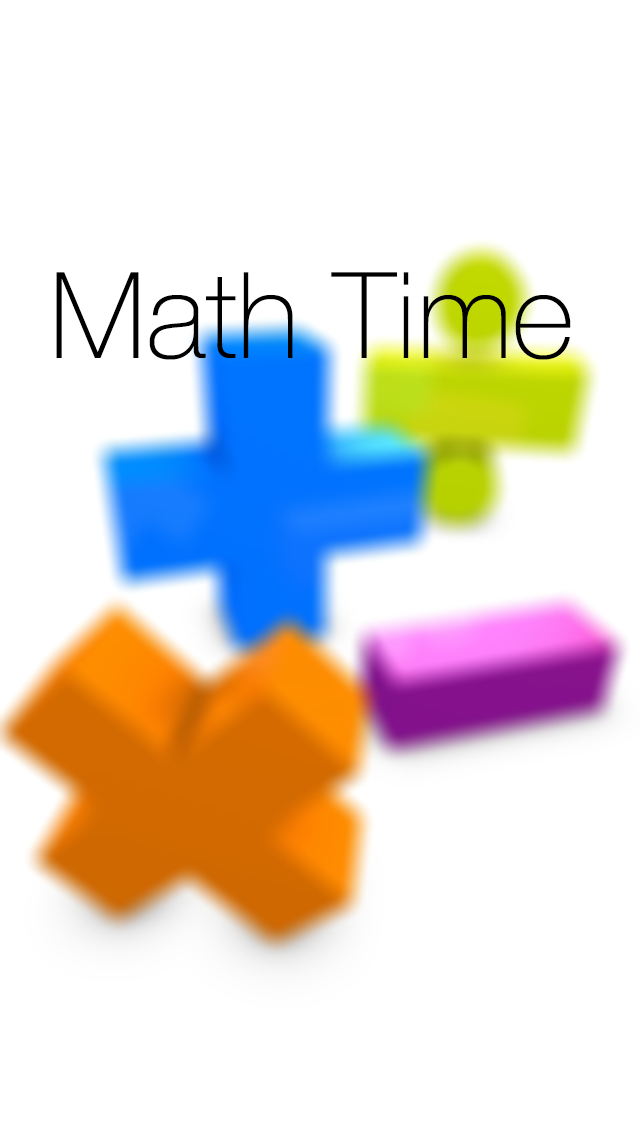
<style>
.page{position:relative;width:640px;height:1136px;background:#ffffff}
.page>*{position:absolute;margin:0}
.t1{font:120px "HelveticaNeue-Thin";color:#000000}
</style>
<div class="page">
<p class="t1" style="left:56px;top:272px;width:515px;height:88px">Math Time</p>
</div>
